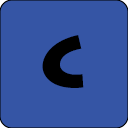
<style>
.page{position:relative;width:128px;height:128px;background:#3555a5}
.page>*{position:absolute;margin:0}
.t1{font:72px "LithosPro-Black";color:#000000}
</style>
<div class="page">
<p class="t1" style="left:42px;top:35px;width:42px;height:53px">C</p>
</div>
